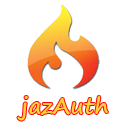
<style>
.page{position:relative;width:128px;height:128px;background:#ffffff}
.page>*{position:absolute;margin:0}
.t1{font:22.5px "SegoePrint-Bold";color:#fcd03a}
</style>
<div class="page">
<p class="t1" style="left:17px;top:96px;width:91px;height:25px">jazAuth</p>
</div>
